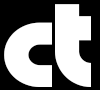
<style>
.page{position:relative;width:100px;height:90px;background:#000000}
.page>*{position:absolute;margin:0}
.t1{font:108.9px "SlugSingleW00-Regular";letter-spacing:0.025em;color:#ffffff;scale:1.11 1}
.t2{font:120px "SlugSingleW00-Regular";letter-spacing:0.025em;color:#ffffff}
</style>
<div class="page">
<p class="t1" style="left:4px;top:4px;width:87px;height:83px">c<span class="t2">t</span></p>
</div>
